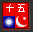
<style>
.page{position:relative;width:33px;height:32px;background:#f20000}
.page>*{position:absolute;margin:0}
.t1{font:10.4px "SimSun";color:#ffffff}
</style>
<div class="page">
<p class="t1" style="left:6px;top:4px;width:19px;height:8px">十五</p>
</div>
